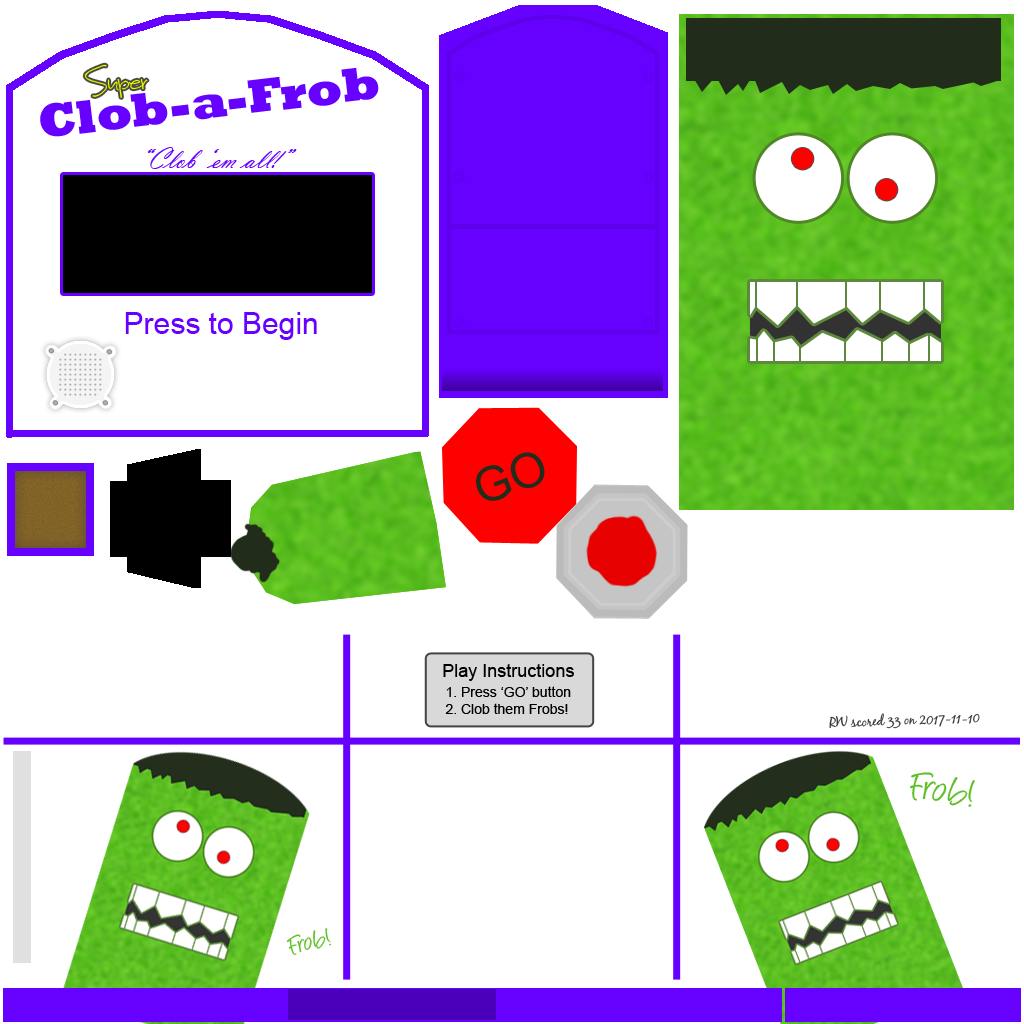
<style>
.page{position:relative;width:1024px;height:1024px;background:#ffffff}
.page>*{position:absolute;margin:0}
.t1{font:48px "SweetHomeOklahoma";color:#eaff00}
.t2{font:48px "Rockwell-ExtraBold";color:#6600ff}
.t3{font:30px "VladimirScript";color:#6600ff}
.t4{font:30px "ArialMT";color:#6600ff}
.t5{font:48px "ArialMT";color:#212c1a}
.t6{font:18px "ArialMT";color:#000000}
.t7{font:14px "ArialMT";color:#000000}
.t8{font:14px "BlackJackRegular";color:#393939}
.t9{font:46.5px "Angelina";color:#5fbf26}
.t10{font:30px "Angelina";color:#5fbf26}
</style>
<div class="page">
<p class="t1" style="left:84px;top:64px;width:64px;height:34px">Super</p>
<p class="t2" style="left:40px;top:67px;width:339px;height:70px;rotate:-7deg">Clob-a-Frob</p>
<p class="t3" style="left:148px;top:147px;width:149px;height:22px">“Clob ‘em all!”</p>
<p class="t4" style="left:125px;top:312px;width:192px;height:28px">Press to Begin</p>
<p class="t5" style="left:476px;top:452px;width:69px;height:49px;rotate:-20deg">GO</p>
<p class="t6" style="left:443px;top:664px;width:131px;height:17px">Play Instructions</p>
<p class="t7" style="left:445px;top:686px;width:126px;height:28px">1. Press ‘GO’ button<br>2. Clob them Frobs!</p>
<p class="t8" style="left:829px;top:713px;width:151px;height:16px;rotate:-2deg">RW scored 33 on 2017-11-10</p>
<p class="t9" style="left:910px;top:772px;width:65px;height:35px;rotate:9deg">Frob!</p>
<p class="t10" style="left:286px;top:928px;width:46px;height:27px;rotate:-14deg">Frob!</p>
</div>
